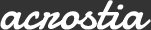
<style>
.page{position:relative;width:151px;height:30px;background:#333333}
.page>*{position:absolute;margin:0}
.t1{font:50px "Damion";color:#ffffff}
</style>
<div class="page">
<p class="t1" style="left:0px;top:0px;width:151px;height:30px">acrostia</p>
</div>
